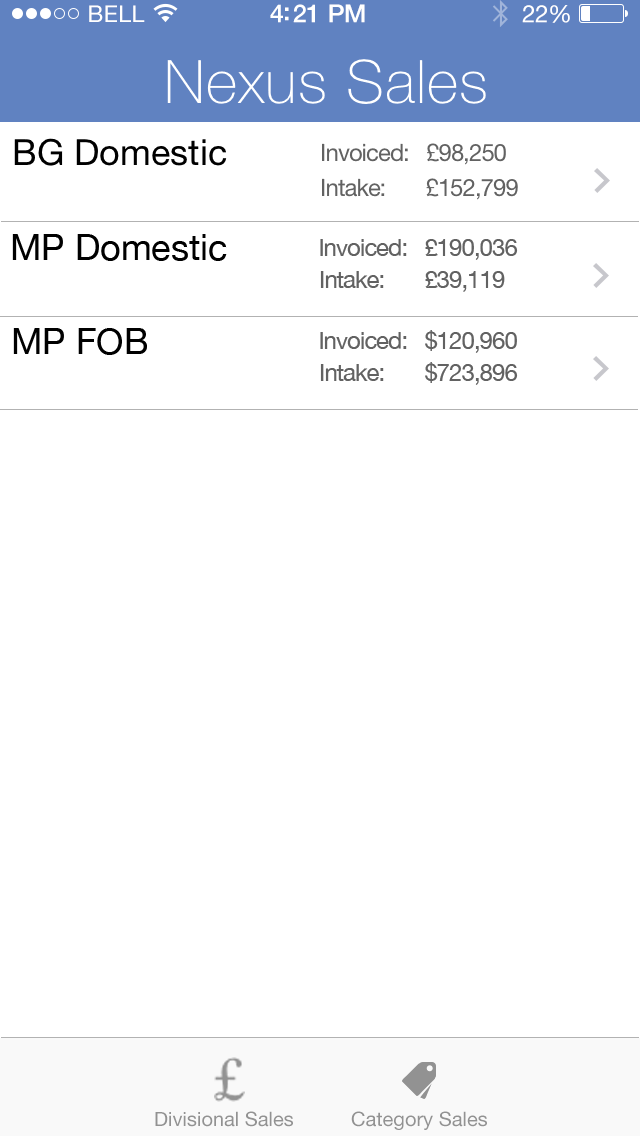
<style>
.page{position:relative;width:640px;height:1136px;background:#ffffff}
.page>*{position:absolute;margin:0}
.t1{font:23px "HelveticaNeue";letter-spacing:0.02em;color:#ffffff}
.t2{font:25px "HelveticaNeue-Medium";letter-spacing:-0.02em;color:#ffffff}
.t3{font:24px "HelveticaNeue";letter-spacing:-0.02em;color:#ffffff}
.t4{font:60px "HelveticaNeue-Thin";letter-spacing:0.02em;color:#ffffff}
.t5{font:36px "HelveticaNeue";color:#000000}
.t6{font:36px "HelveticaNeue";letter-spacing:-0.04em;color:#000000}
.t7{font:24px "HelveticaNeue";letter-spacing:-0.04em;color:#626262}
.t8{font:35.9px "HelveticaNeue";color:#000000}
.t9{font:35.9px "HelveticaNeue";letter-spacing:-0.04em;color:#000000}
.t10{font:19.8px "HelveticaNeue";color:#929292}
</style>
<div class="page">
<p class="t1" style="left:89px;top:5px;width:56px;height:17px">BELL</p>
<p class="t2" style="left:270px;top:4px;width:95px;height:19px">4:21 PM</p>
<p class="t3" style="left:522px;top:5px;width:48px;height:18px">22%</p>
<p class="t4" style="left:167px;top:59px;width:319px;height:45px">Nexus Sales</p>
<p class="t5" style="left:14px;top:138px;width:213px;height:28px">BG Domesti<span class="t6">c</span></p>
<p class="t7" style="left:322px;top:143px;width:184px;height:22px">Invoiced:   £98,250</p>
<p class="t7" style="left:322px;top:178px;width:196px;height:22px">Intake:       £152,799</p>
<p class="t8" style="left:12px;top:234px;width:215px;height:27px">MP Domesti<span class="t9">c</span></p>
<p class="t7" style="left:320px;top:239px;width:198px;height:21px">Invoiced:   £190,036</p>
<p class="t7" style="left:320px;top:271px;width:185px;height:21px">Intake:       £39,119</p>
<p class="t8" style="left:13px;top:328px;width:134px;height:27px">MP FOB</p>
<p class="t7" style="left:320px;top:330px;width:197px;height:23px">Invoiced:   $120,960</p>
<p class="t7" style="left:320px;top:362px;width:198px;height:23px">Intake:       $723,896</p>
<p class="t10" style="left:155px;top:1111px;width:138px;height:16px">Divisional Sales</p>
<p class="t10" style="left:351px;top:1111px;width:136px;height:19px">Category Sales</p>
</div>
